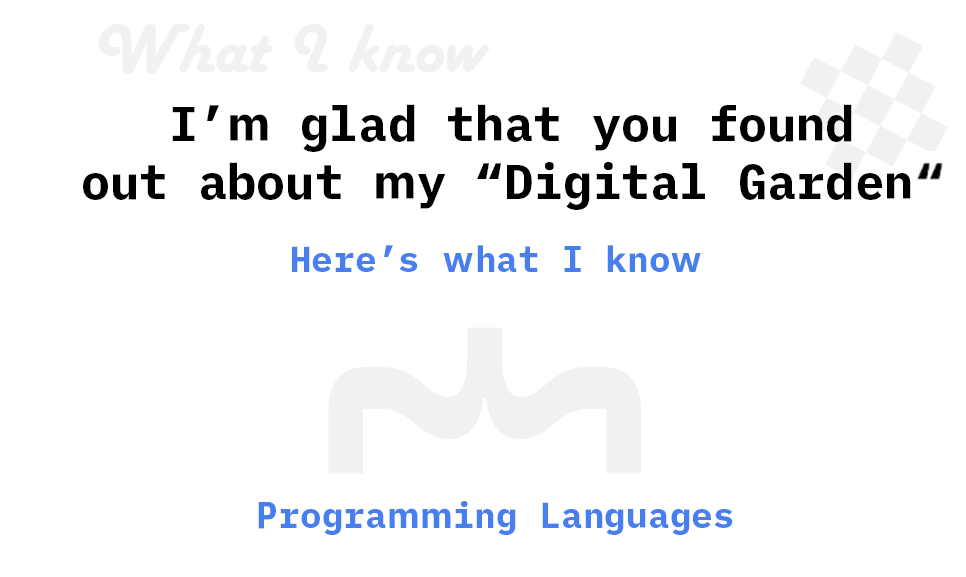
<style>
.page{position:relative;width:966px;height:577px;background:#ffffff}
.page>*{position:absolute;margin:0}
.t1{font:72px "HarlowSolid";color:#f2f0f1}
.t2{font:48.3px "iAWriterDuospace-Bold";color:#000000}
.t3{font:36px "iAWriterDuospace-Bold";color:#487fee}
.t4{font:347.9px "iAWriterDuospace-Bold";color:#f2f0f1}
</style>
<div class="page">
<p class="t1" style="left:98px;top:24px;width:392px;height:50px">What I know</p>
<p class="t2" style="left:83px;top:104px;width:828px;height:106px;text-align:center">I’m glad that you found <br>out about my “Digital Garden</p>
<p class="t3" style="left:292px;top:245px;width:409px;height:27px">Here’s what I know</p>
<p class="t4" style="left:328px;top:327px;width:313px;height:147px;rotate:-90deg">{</p>
<p class="t3" style="left:258px;top:501px;width:475px;height:34px">Programming Languages</p>
</div>
